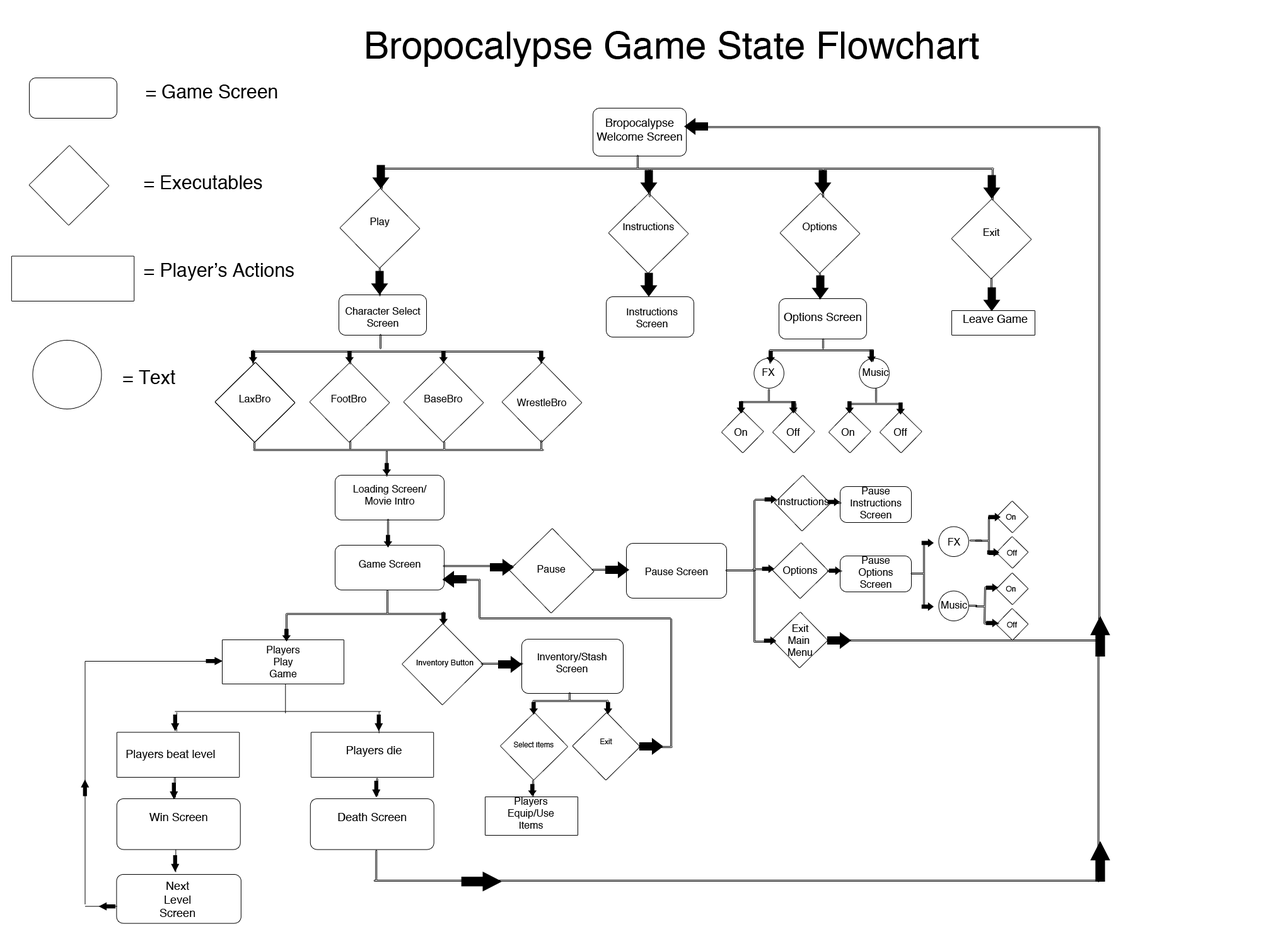
<style>
.page{position:relative;width:1261px;height:946px;background:#ffffff}
.page>*{position:absolute;margin:0}
.t1{font:37.8px "Helvetica";color:#000000}
.t2{font:18.9px "Helvetica";color:#000000}
.t3{font:11.3px "Helvetica";color:#000000}
.t4{font:10.1px "Helvetica";color:#000000}
.t5{font:7.8px "Helvetica";color:#000000}
.t6{font:7.6px "Helvetica";color:#000000}
.t7{font:7.9px "Helvetica";color:#000000}
.t8{font:7.3px "Helvetica";color:#000000}
</style>
<div class="page">
<p class="t1" style="left:366px;top:31px;width:613px;height:36px">Bropocalypse Game State Flowchart</p>
<p class="t2" style="left:146px;top:84px;width:131px;height:14px">= Game Screen</p>
<p class="t3" style="left:596px;top:119px;width:86px;height:22px;text-align:center">Bropocalypse<br>Welcome Screen</p>
<p class="t2" style="left:144px;top:175px;width:118px;height:14px">= Executables</p>
<p class="t4" style="left:370px;top:218px;width:20px;height:9px"><span class="t5"><br><br><br></span>Play</p>
<p class="t4" style="left:623px;top:223px;width:51px;height:7px"><span class="t5"><br><br><br></span>Instructions</p>
<p class="t4" style="left:803px;top:223px;width:34px;height:9px"><span class="t5"><br><br><br></span>Options</p>
<p class="t4" style="left:984px;top:228px;width:16px;height:8px"><span class="t5"><br><br><br></span>Exit</p>
<p class="t2" style="left:144px;top:263px;width:150px;height:18px">= Player’s Actions</p>
<p class="t4" style="left:345px;top:307px;width:76px;height:20px;text-align:center">Character Select<br>Screen</p>
<p class="t4" style="left:627px;top:308px;width:51px;height:19px;text-align:center"><span class="t3"><br></span>Instructions <br>Screen</p>
<p class="t3" style="left:784px;top:313px;width:77px;height:10px">Options Screen</p>
<p class="t3" style="left:963px;top:315px;width:65px;height:8px">Leave Game</p>
<p class="t2" style="left:123px;top:370px;width:52px;height:14px">= Text</p>
<p class="t4" style="left:762px;top:368px;width:13px;height:8px">FX</p>
<p class="t4" style="left:862px;top:368px;width:27px;height:8px">Music</p>
<p class="t4" style="left:239px;top:395px;width:31px;height:7px">LaxBro</p>
<p class="t4" style="left:331px;top:395px;width:35px;height:7px">FootBro</p>
<p class="t4" style="left:424px;top:395px;width:39px;height:7px">BaseBro</p>
<p class="t4" style="left:517px;top:398px;width:50px;height:8px">WrestleBro</p>
<p class="t4" style="left:734px;top:428px;width:13px;height:8px">On</p>
<p class="t4" style="left:786px;top:428px;width:14px;height:8px">Off</p>
<p class="t4" style="left:841px;top:428px;width:13px;height:8px">On</p>
<p class="t4" style="left:893px;top:428px;width:14px;height:8px">Off</p>
<p class="t4" style="left:353px;top:485px;width:74px;height:19px;text-align:center">Loading Screen/<br>Movie Intro</p>
<p class="t4" style="left:778px;top:497px;width:51px;height:8px">Instructions</p>
<p class="t4" style="left:850px;top:487px;width:52px;height:31px;text-align:center">Pause<br>Instructions<br>Screen</p>
<p class="t6" style="left:1006px;top:514px;width:10px;height:5px">On</p>
<p class="t4" style="left:948px;top:538px;width:12px;height:7px">FX</p>
<p class="t4" style="left:859px;top:556px;width:34px;height:32px;text-align:center">Pause<br>Options<br>Screen</p>
<p class="t6" style="left:1007px;top:550px;width:10px;height:5px">Off</p>
<p class="t4" style="left:359px;top:560px;width:62px;height:7px">Game Screen</p>
<p class="t4" style="left:537px;top:565px;width:29px;height:7px">Pause</p>
<p class="t4" style="left:646px;top:567px;width:62px;height:8px">Pause Screen</p>
<p class="t4" style="left:783px;top:566px;width:34px;height:10px">Options</p>
<p class="t6" style="left:1006px;top:586px;width:10px;height:5px">On</p>
<p class="t4" style="left:941px;top:601px;width:26px;height:7px">Music</p>
<p class="t4" style="left:788px;top:624px;width:24px;height:32px;text-align:center">Exit<br>Main <br>Menu</p>
<p class="t6" style="left:1007px;top:622px;width:10px;height:5px">Off</p>
<p class="t4" style="left:267px;top:646px;width:33px;height:31px;text-align:center">Players <br>Play<br>Game</p>
<p class="t4" style="left:538px;top:653px;width:69px;height:19px;text-align:center">Inventory/Stash<br>Screen</p>
<p class="t7" style="left:416px;top:659px;width:57px;height:8px">Inventory Button</p>
<p class="t3" style="left:126px;top:750px;width:89px;height:10px">Players beat level</p>
<p class="t3" style="left:347px;top:746px;width:55px;height:11px">Players die</p>
<p class="t8" style="left:514px;top:741px;width:40px;height:6px">Select Items</p>
<p class="t8" style="left:600px;top:738px;width:12px;height:6px">Exit</p>
<p class="t4" style="left:508px;top:797px;width:46px;height:31px;text-align:center">Players<br>Equip/Use<br>Items</p>
<p class="t3" style="left:149px;top:813px;width:58px;height:8px">Win Screen</p>
<p class="t3" style="left:338px;top:813px;width:69px;height:8px">Death Screen</p>
<p class="t3" style="left:160px;top:881px;width:35px;height:36px;text-align:center">Next <br>Level<br>Screen</p>
</div>
